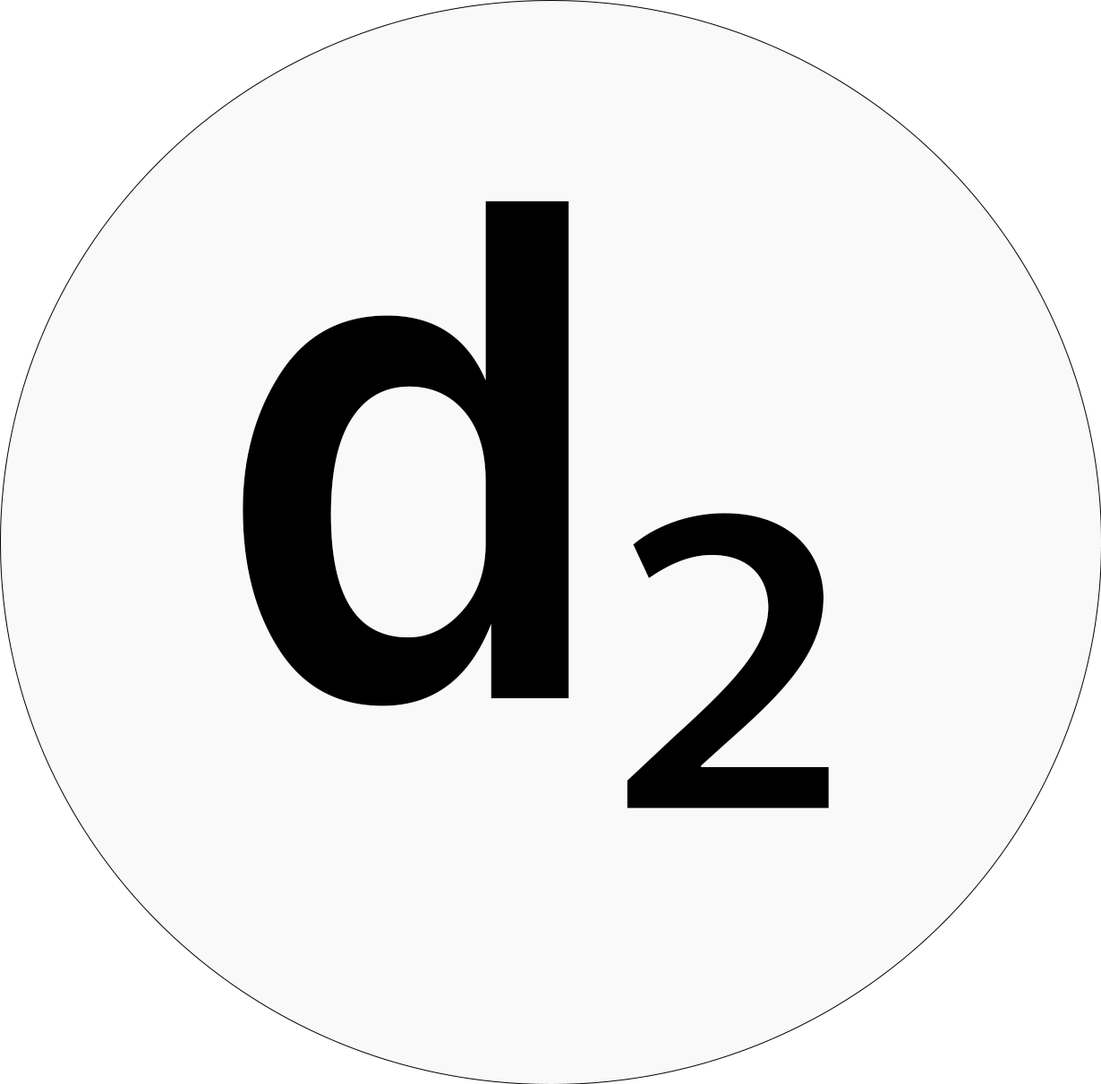
<style>
.page{position:relative;width:1101px;height:1084px;background:#f9f9f9}
.page>*{position:absolute;margin:0}
.t1{font:745.6px "FranklinGothic-Medium";color:#000000}
.t2{font:745.6px "MyriadPro-Regular";color:#000000}
</style>
<div class="page">
<p class="t1" style="left:242px;top:200px;width:587px;height:608px">d<span class="t2">₂</span></p>
</div>
